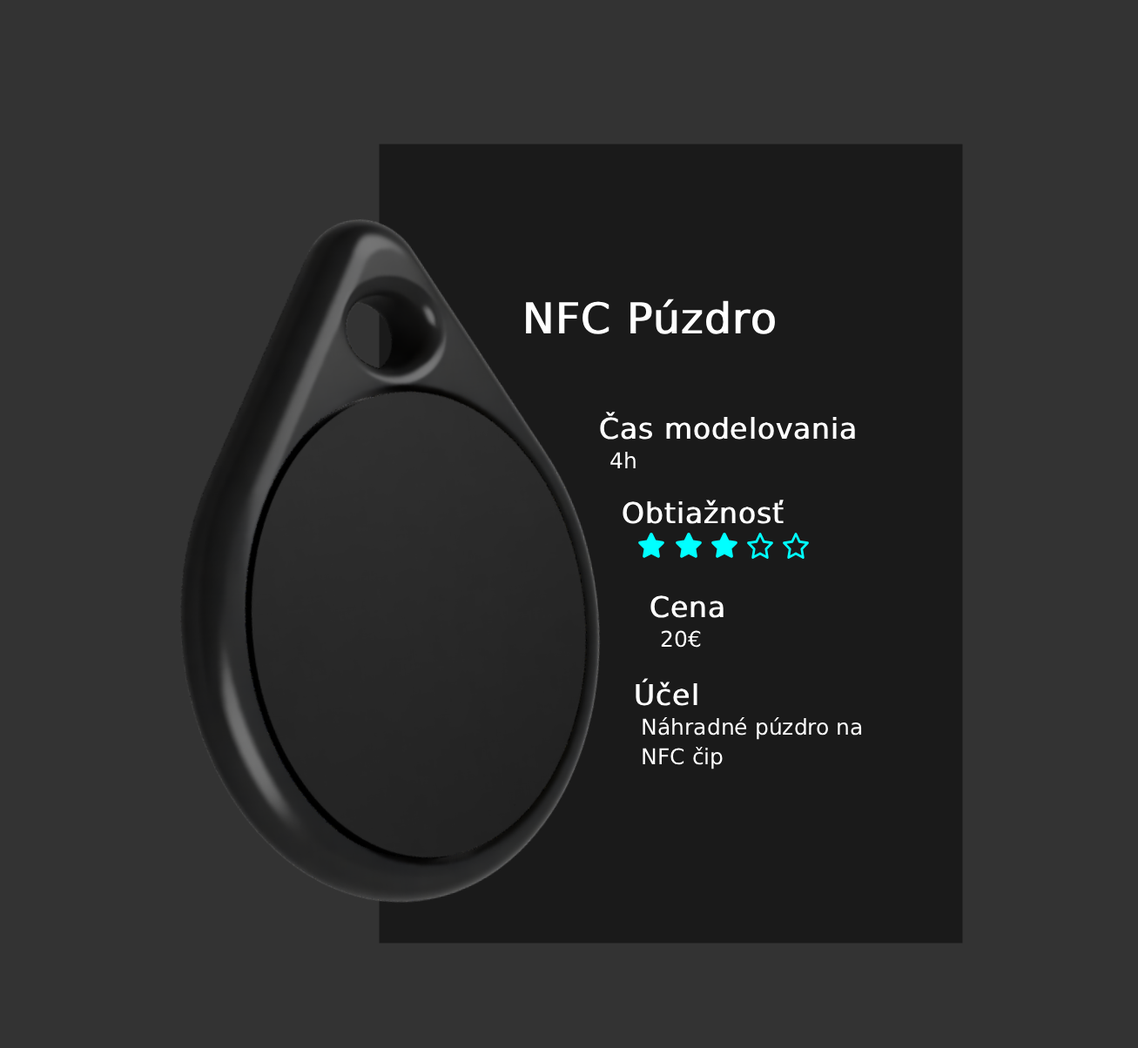
<style>
.page{position:relative;width:1138px;height:1048px;background:#333333}
.page>*{position:absolute;margin:0}
.t1{font:42.7px "DejaVuSans";color:#ffffff;font-weight:bold}
.t2{font:28.7px/29.6px "DejaVuSans";color:#ffffff;font-weight:bold}
.t3{font:21.8px/29.6px "DejaVuSans";color:#ffffff}
.t4{font:28.7px "DejaVuSans";color:#ffffff;font-weight:bold}
</style>
<div class="page">
<p class="t1" style="left:526px;top:299px;width:249px;height:35px">NFC Púzdro</p>
<p class="t2" style="left:600px;top:412px;width:255px;height:56px">Čas modelovania<br> <span class="t3">4h</span></p>
<p class="t4" style="left:622px;top:500px;width:161px;height:24px">Obtiažnosť</p>
<p class="t2" style="left:650px;top:595px;width:73px;height:53px">Cena<br> <span class="t3">20€</span></p>
<p class="t3" style="left:635px;top:678px;width:227px;height:92px"><span class="t2">Účel<br> </span>Náhradné púzdro na<br> NFC čip</p>
</div>
